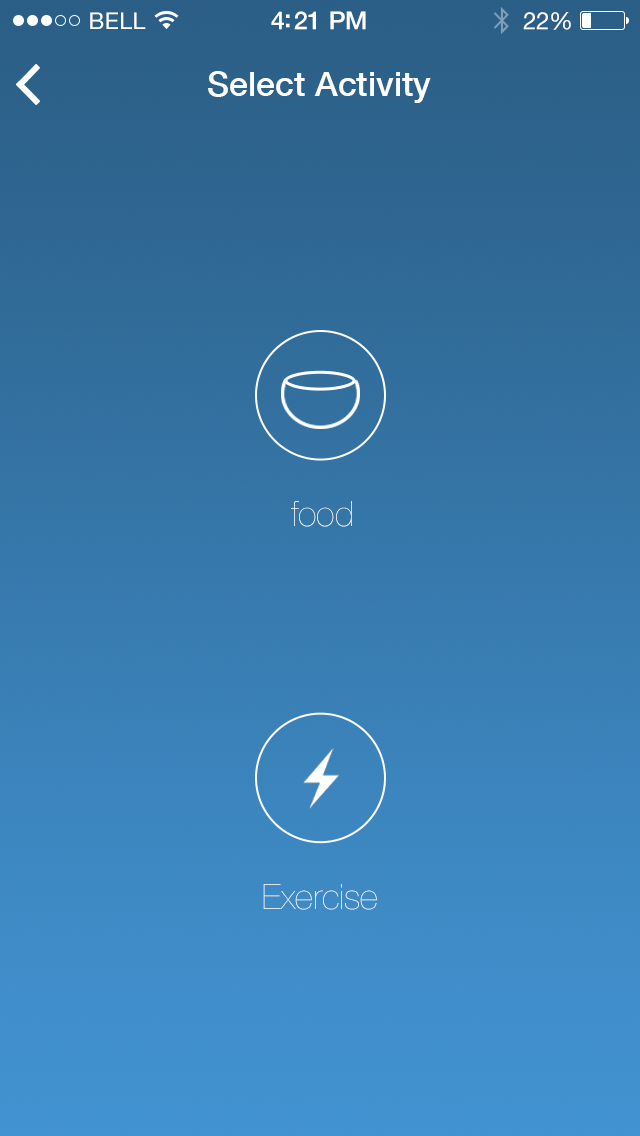
<style>
.page{position:relative;width:640px;height:1136px}
.page>*{position:absolute;margin:0}
.t1{font:23px "HelveticaNeue";letter-spacing:0.02em;color:#ffffff}
.t2{font:25px "HelveticaNeue-Medium";letter-spacing:-0.02em;color:#ffffff}
.t3{font:24px "HelveticaNeue";letter-spacing:-0.02em;color:#ffffff}
.t4{font:34px "HelveticaNeue-Medium";color:#ffffff}
.t5{font:35px "HelveticaNeue-UltraLight";color:#ffffff}
</style>
<div class="page">
<p class="t1" style="left:90px;top:12px;width:56px;height:17px">BELL</p>
<p class="t2" style="left:271px;top:11px;width:95px;height:19px">4:21 PM</p>
<p class="t3" style="left:523px;top:12px;width:48px;height:18px">22%</p>
<p class="t4" style="left:208px;top:71px;width:223px;height:32px">Select Activity</p>
<p class="t5" style="left:291px;top:501px;width:61px;height:26px">food</p>
<p class="t5" style="left:263px;top:884px;width:114px;height:26px">Exercise</p>
</div>
